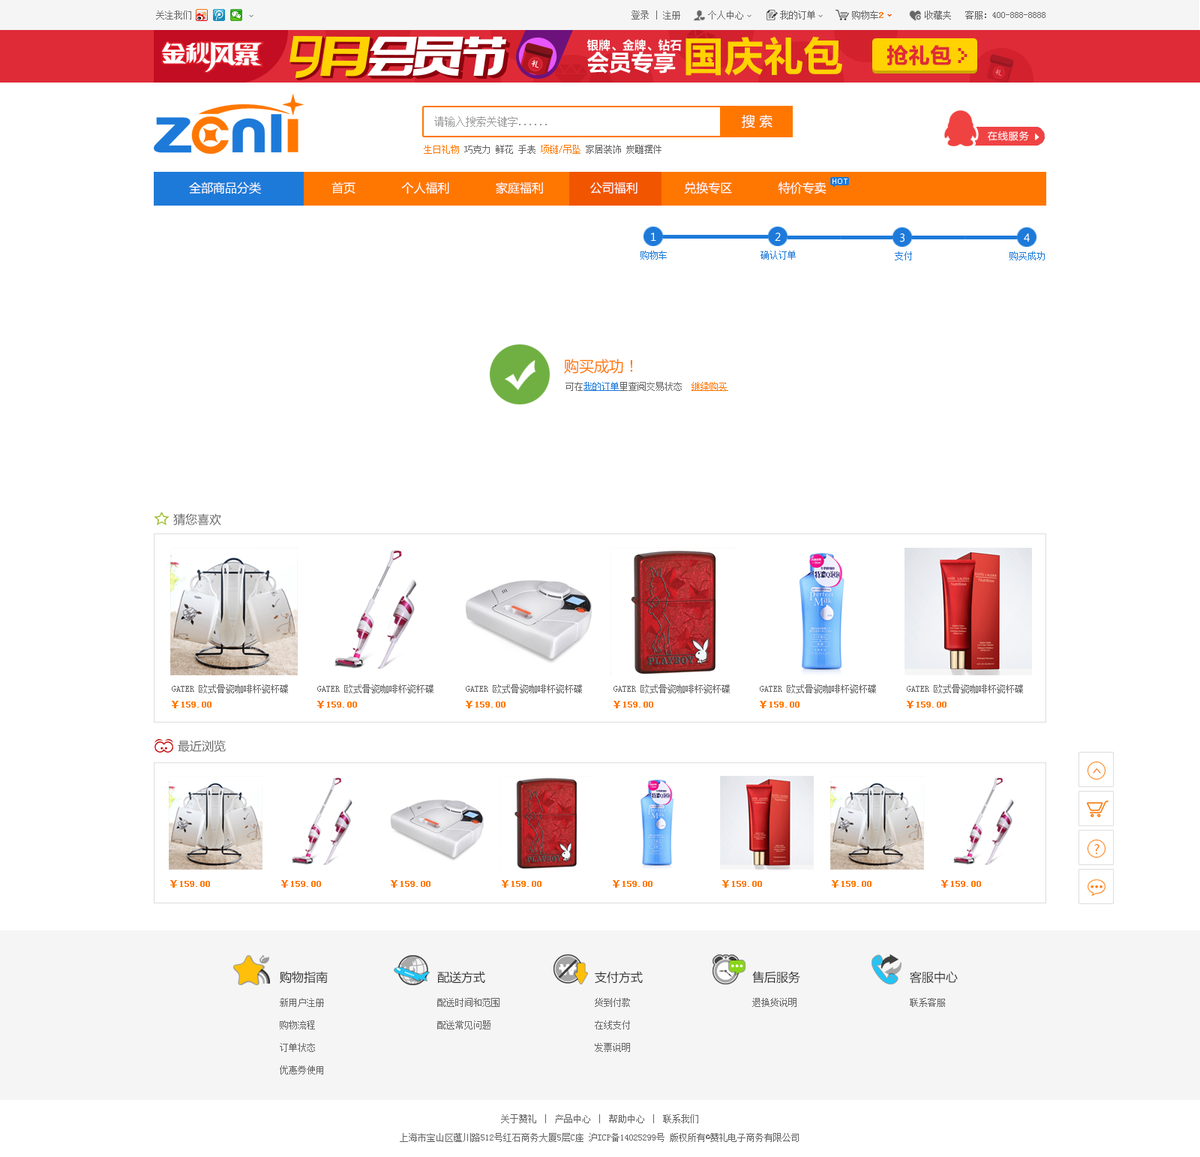
<style>
.page{position:relative;width:1200px;height:1157px;background:#ffffff}
.page>*{position:absolute;margin:0}
.t1{font:9px "SimSun";color:#666666}
.t2{font:9px "SimSun";color:#ff7700;font-weight:bold}
.t3{font:10.5px "SimSun";color:#999999}
.t4{font:13.5px "MicrosoftYaHei";color:#ffffff}
.t5{font:9px "SimSun";color:#ff7700}
.t6{font:12px "MicrosoftYaHei";color:#ffffff}
.t7{font:7.5px "ArialMT";color:#ffffff}
.t8{font:10.5px "MicrosoftYaHei";color:#ffffff}
.t9{font:9px "SimSun";color:#1d7ad9}
.t10{font:15px "MicrosoftYaHei";color:#ff7700}
.t11{font:9px "SimSun";color:#1d7ad9;text-decoration:underline}
.t12{font:9px "SimSun";color:#ff7700;text-decoration:underline}
.t13{font:12px "MicrosoftYaHei";color:#666666}
.t14{font:15.7px "MicrosoftYaHei";color:#ff7700;scale:0.64 1}
.t15{font:12.8px "MicrosoftYaHei";color:#ff7700}
.t16{font:12px "MicrosoftYaHei";color:#333333}
.t17{font:9px/22.5px "SimSun";color:#666666}
.t18{font:9px/18.7px "SimSun";color:#666666}
</style>
<div class="page">
<p class="t1" style="left:156px;top:11px;width:35px;height:9px">关注我们</p>
<p class="t1" style="left:632px;top:11px;width:414px;height:9px">登录 | 注册      个人中心        我的订单        购物车<span class="t2">2</span>         收藏夹   客服：400-888-8888</p>
<p class="t3" style="left:434px;top:116px;width:113px;height:11px">请输入搜索关键字......</p>
<p class="t4" style="left:742px;top:115px;width:31px;height:13px">搜 索</p>
<p class="t1" style="left:424px;top:145px;width:238px;height:9px"><span class="t5">生日礼物</span> 巧克力 鲜花 手表 <span class="t5">项链/吊坠</span> 家居装饰 炭雕摆件</p>
<p class="t6" style="left:189px;top:182px;width:72px;height:12px">全部商品分类</p>
<p class="t6" style="left:332px;top:182px;width:495px;height:12px">首页             个人福利             家庭福利             公司福利             兑换专区             特价专卖</p>
<p class="t7" style="left:833px;top:179px;width:15px;height:5px">HOT</p>
<p class="t8" style="left:651px;top:233px;width:5px;height:8px">1</p>
<p class="t8" style="left:775px;top:233px;width:6px;height:8px">2</p>
<p class="t8" style="left:900px;top:233px;width:5px;height:9px">3</p>
<p class="t8" style="left:1024px;top:233px;width:6px;height:9px">4</p>
<p class="t9" style="left:641px;top:251px;width:26px;height:9px">购物车</p>
<p class="t9" style="left:761px;top:251px;width:35px;height:9px">确认订单</p>
<p class="t9" style="left:895px;top:251px;width:17px;height:9px">支付</p>
<p class="t9" style="left:1010px;top:251px;width:35px;height:9px">购买成功</p>
<p class="t10" style="left:564px;top:359px;width:69px;height:15px">购买成功！</p>
<p class="t1" style="left:566px;top:382px;width:162px;height:9px">可在<span class="t11">我的订单</span>里查阅交易状态  <span class="t12">继续购买</span></p>
<p class="t13" style="left:173px;top:513px;width:48px;height:13px">猜您喜欢</p>
<p class="t1" style="left:172px;top:684px;width:116px;height:9px">GATER 欧式骨瓷咖啡杯瓷杯碟 咖啡茶杯 骨质瓷 两件套 咖</p>
<p class="t1" style="left:317px;top:684px;width:117px;height:9px">GATER 欧式骨瓷咖啡杯瓷杯碟 咖啡茶杯 骨质瓷 两件套 咖</p>
<p class="t1" style="left:466px;top:684px;width:116px;height:9px">GATER 欧式骨瓷咖啡杯瓷杯碟 咖啡茶杯 骨质瓷 两件套 咖</p>
<p class="t1" style="left:614px;top:684px;width:116px;height:9px">GATER 欧式骨瓷咖啡杯瓷杯碟 咖啡茶杯 骨质瓷 两件套 咖</p>
<p class="t1" style="left:760px;top:684px;width:116px;height:9px">GATER 欧式骨瓷咖啡杯瓷杯碟 咖啡茶杯 骨质瓷 两件套 咖</p>
<p class="t1" style="left:907px;top:684px;width:116px;height:9px">GATER 欧式骨瓷咖啡杯瓷杯碟 咖啡茶杯 骨质瓷 两件套 咖</p>
<p class="t2" style="left:172px;top:701px;width:40px;height:7px">￥159.00</p>
<p class="t2" style="left:317px;top:701px;width:40px;height:7px">￥159.00</p>
<p class="t2" style="left:466px;top:701px;width:40px;height:7px">￥159.00</p>
<p class="t2" style="left:614px;top:701px;width:39px;height:7px">￥159.00</p>
<p class="t2" style="left:760px;top:701px;width:40px;height:7px">￥159.00</p>
<p class="t2" style="left:907px;top:701px;width:40px;height:7px">￥159.00</p>
<p class="t13" style="left:178px;top:740px;width:48px;height:12px">最近浏览</p>
<p class="t14" style="left:1093px;top:768px;width:8px;height:5px;rotate:90deg">&lt;</p>
<p class="t15" style="left:1094px;top:844px;width:6px;height:10px">?</p>
<p class="t2" style="left:170px;top:880px;width:40px;height:7px">￥159.00</p>
<p class="t2" style="left:281px;top:880px;width:40px;height:7px">￥159.00</p>
<p class="t2" style="left:391px;top:880px;width:40px;height:7px">￥159.00</p>
<p class="t2" style="left:502px;top:880px;width:40px;height:7px">￥159.00</p>
<p class="t2" style="left:613px;top:880px;width:40px;height:7px">￥159.00</p>
<p class="t2" style="left:722px;top:880px;width:40px;height:7px">￥159.00</p>
<p class="t2" style="left:832px;top:880px;width:40px;height:7px">￥159.00</p>
<p class="t2" style="left:941px;top:880px;width:40px;height:7px">￥159.00</p>
<p class="t16" style="left:280px;top:971px;width:48px;height:12px">购物指南</p>
<p class="t16" style="left:437px;top:971px;width:48px;height:12px">配送方式</p>
<p class="t16" style="left:595px;top:971px;width:48px;height:12px">支付方式</p>
<p class="t16" style="left:752px;top:971px;width:48px;height:12px">售后服务</p>
<p class="t16" style="left:910px;top:971px;width:48px;height:12px">客服中心</p>
<p class="t17" style="left:280px;top:998px;width:44px;height:76px">新用户注册<br>购物流程<br>订单状态<br>优惠券使用</p>
<p class="t17" style="left:437px;top:998px;width:63px;height:31px">配送时间和范围<br>配送常见问题</p>
<p class="t17" style="left:595px;top:998px;width:35px;height:54px">货到付款<br>在线支付<br>发票说明</p>
<p class="t1" style="left:752px;top:998px;width:45px;height:9px">退换货说明</p>
<p class="t1" style="left:910px;top:998px;width:35px;height:9px">联系客服</p>
<p class="t18" style="left:400px;top:1114px;width:399px;height:28px;text-align:center">关于赞礼 │ 产品中心 │ 帮助中心 │ 联系我们<br>上海市宝山区蕴川路512号红石商务大厦5层C座 沪ICP备14025299号 版权所有©赞礼电子商务有限公司</p>
</div>
